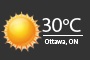
<style>
.page{position:relative;width:90px;height:60px;background:#333333}
.page>*{position:absolute;margin:0}
.t1{font:20.8px "MyriadPro-Regular";color:#ffffff}
.t2{font:6.9px "MyriadPro-Regular";color:#ffffff}
</style>
<div class="page">
<p class="t1" style="left:42px;top:18px;width:39px;height:14px">30oC</p>
<p class="t2" style="left:44px;top:39px;width:34px;height:6px">Ottawa, ON</p>
</div>
